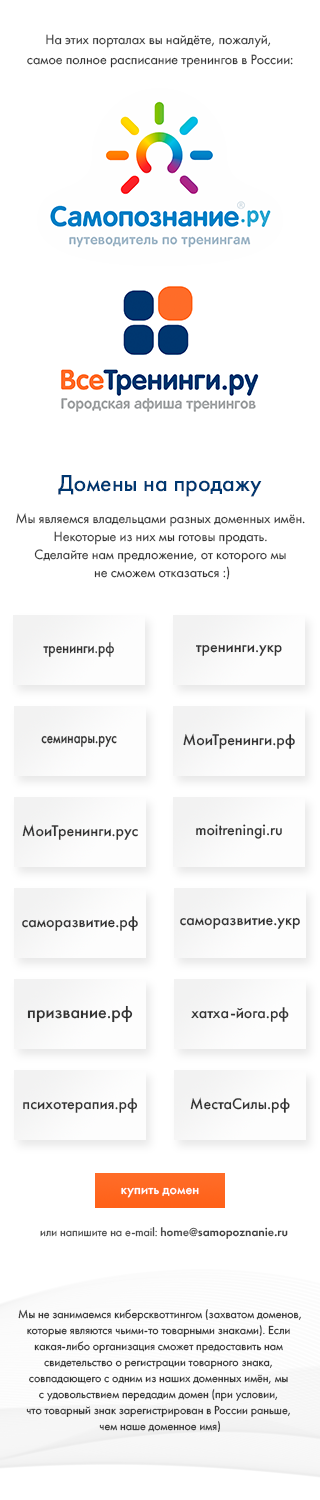
<style>
.page{position:relative;width:320px;height:1500px;background:#ffffff}
.page>*{position:absolute;margin:0}
.t1{font:14px/20px "FuturaPT-Book";color:#333333}
.t2{font:24px "FuturaPT-Medium";color:#003770}
.t3{font:14px/18px "FuturaPT-Book";color:#333333}
.t4{font:16px "FuturaPT-Medium";color:#333333;scale:0.86 1}
.t5{font:16px "FuturaPT-Medium";color:#333333}
.t6{font:16px "FuturaPT-Medium";color:#333333;scale:0.81 1}
.t7{font:18px "FuturaPT-Medium";color:#333333}
.t8{font:14px "FuturaPT-Medium";letter-spacing:0.01em;color:#ffffff}
.t9{font:12px "FuturaPT-Book";color:#404040}
.t10{font:12px "FuturaPT-Demi";color:#404040}
.t11{font:12px/16px "FuturaPT-Book";color:#333333}
</style>
<div class="page">
<p class="t1" style="left:27px;top:34px;width:266px;height:34px;text-align:center">На этих порталах вы найдёте, пожалуй, <br>самое полное расписание тренингов в России:</p>
<p class="t2" style="left:58px;top:475px;width:204px;height:22px">Домены на продажу</p>
<p class="t3" style="left:16px;top:513px;width:289px;height:67px;text-align:center">Мы являемся владельцами разных доменных имён. <br>Некоторые из них мы готовы продать. <br>Сделайте нам предложение, от которого мы <br>не сможем отказаться :)</p>
<p class="t4" style="left:43px;top:642px;width:71px;height:15px">тренинги.рф</p>
<p class="t5" style="left:196px;top:644px;width:86px;height:12px">тренинги.укр</p>
<p class="t6" style="left:41px;top:735px;width:76px;height:12px">семинары.рус</p>
<p class="t5" style="left:183px;top:733px;width:112px;height:16px">МоиТренинги.рф</p>
<p class="t5" style="left:22px;top:824px;width:116px;height:16px">МоиТренинги.рус</p>
<p class="t5" style="left:196px;top:824px;width:86px;height:15px">moitreningi.ru</p>
<p class="t5" style="left:22px;top:916px;width:116px;height:15px">саморазвитие.рф</p>
<p class="t5" style="left:180px;top:917px;width:120px;height:12px">саморазвитие.укр</p>
<p class="t7" style="left:27px;top:1005px;width:106px;height:18px">призвание.рф</p>
<p class="t5" style="left:191px;top:1007px;width:98px;height:15px">хатха-йога.рф</p>
<p class="t5" style="left:190px;top:1097px;width:100px;height:16px">МестаСилы.рф</p>
<p class="t5" style="left:23px;top:1098px;width:115px;height:15px">психотерапия.рф</p>
<p class="t8" style="left:121px;top:1187px;width:78px;height:11px">купить домен</p>
<p class="t9" style="left:40px;top:1227px;width:248px;height:12px">или напишите на e-mail: <span class="t10">home@samopoznanie.ru</span></p>
<p class="t11" style="left:18px;top:1309px;width:283px;height:123px;text-align:center">Мы не занимаемся киберсквоттингом (захватом доменов,<br>которые являются чьими-то товарными знаками). Если <br>какая-либо организация сможет предоставить нам <br>свидетельство о регистрации товарного знака, <br>совпадающего с одним из наших доменных имён, мы <br>с удовольствием передадим домен (при условии, <br>что товарный знак зарегистрирован в России раньше, <br>чем наше доменное имя)</p>
</div>
